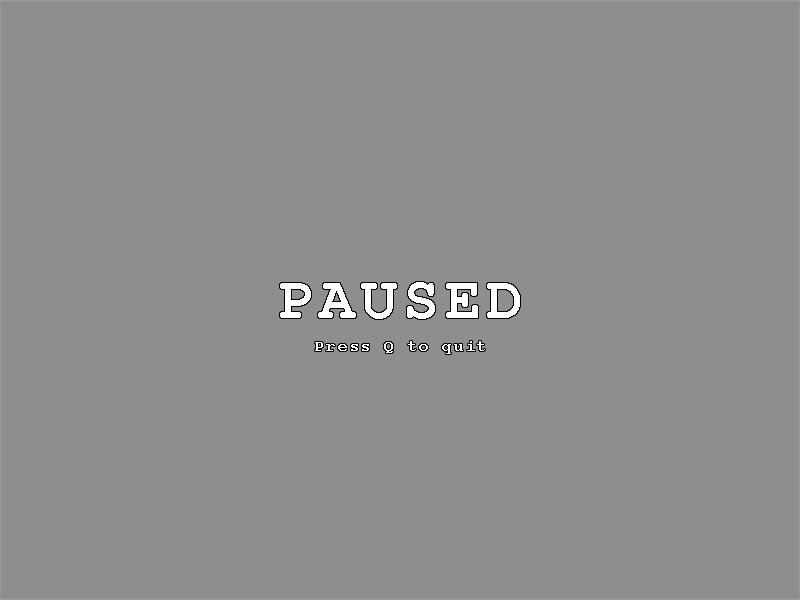
<style>
.page{position:relative;width:800px;height:600px;background:#8e8e8d}
.page>*{position:absolute;margin:0}
.t1{font:60px "CourierNewPS-BoldMT";letter-spacing:0.1em;color:#ffffff}
.t2{font:16px "CourierNewPS-BoldMT";letter-spacing:0.1em;color:#ffffff}
</style>
<div class="page">
<p class="t1" style="left:280px;top:282px;width:240px;height:37px">PAUSED</p>
<p class="t2" style="left:315px;top:341px;width:170px;height:13px">Press Q to quit</p>
</div>
